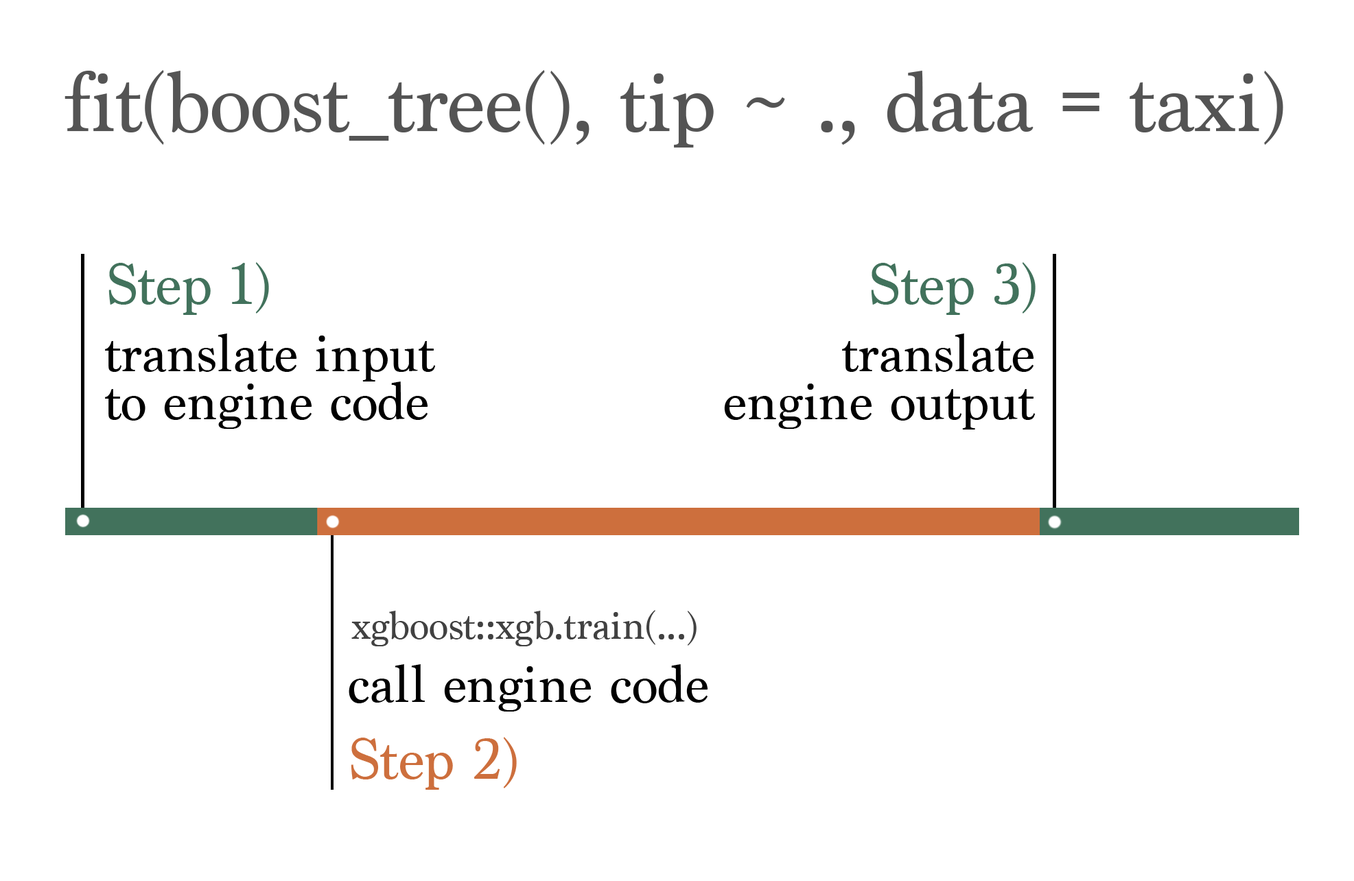
<style>
.page{position:relative;width:1354px;height:881px;background:#ffffff}
.page>*{position:absolute;margin:0}
.t1{font:87.5px "Marion-Regular";color:#545454}
.t2{font:60.3px "Marion-Regular";color:#42725c}
.t3{font:55.2px/48.3px "Marion-Regular";color:#000000}
.t4{font:41.4px "Marion-Regular";color:#414141}
.t5{font:55.2px "Marion-Regular";color:#000000}
.t6{font:60.3px "Marion-Regular";color:#cd6f3d}
</style>
<div class="page">
<p class="t1" style="left:64px;top:70px;width:1219px;height:78px">fit(boost_tree(), tip ~ ., data = taxi)</p>
<p class="t2" style="left:108px;top:262px;width:161px;height:53px">Step 1)</p>
<p class="t2" style="left:871px;top:262px;width:164px;height:53px">Step 3)</p>
<p class="t3" style="left:105px;top:333px;width:331px;height:96px">translate input<br>to engine code</p>
<p class="t3" style="left:724px;top:333px;width:311px;height:96px;text-align:right">translate<br>engine output</p>
<p class="t4" style="left:351px;top:610px;width:345px;height:36px">xgboost::xgb.train(...)</p>
<p class="t5" style="left:349px;top:664px;width:358px;height:47px">call engine code</p>
<p class="t6" style="left:351px;top:737px;width:166px;height:53px">Step 2)</p>
</div>
